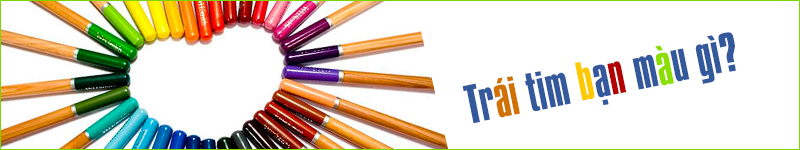
<style>
.page{position:relative;width:800px;height:150px;background:#ffffff}
.page>*{position:absolute;margin:0}
.t1{font:47.3px "HP-Compac-Regular";color:#33589c}
.t2{font:47.3px "HP-Compac-Regular";color:#d07201}
.t3{font:47.3px "HP-Compac-Regular";color:#ffc900}
.t4{font:47.3px "HP-Compac-Regular";color:#b30202}
.t5{font:47.3px "HP-Compac-Regular";color:#8cde00}
</style>
<div class="page">
<p class="t1" style="left:462px;top:32px;width:274px;height:92px;rotate:-11deg">Tr<span class="t2">aùi</span> tim <span class="t3">b</span>aï<span class="t4">n </span>m<span class="t5">aø</span>u gì?</p>
</div>
